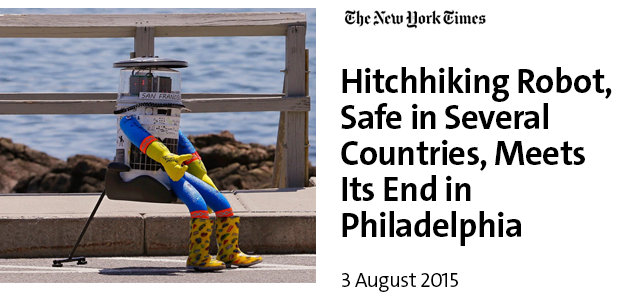
<style>
.page{position:relative;width:633px;height:300px;background:#ffffff}
.page>*{position:absolute;margin:0}
.t1{font:35px/36px "V&ATheSansC6s-Bold";letter-spacing:-0.02em;color:#000000}
.t2{font:20.8px "V&ATheSansC6s-SemiLight";letter-spacing:-0.02em;color:#000000}
</style>
<div class="page">
<p class="t1" style="left:341px;top:67px;width:271px;height:179px">Hitchhiking Robot,<br>Safe in Several<br>Countries, Meets <br>Its End in<br>Philadelphia</p>
<p class="t2" style="left:342px;top:273px;width:116px;height:19px">3 August 2015</p>
</div>
